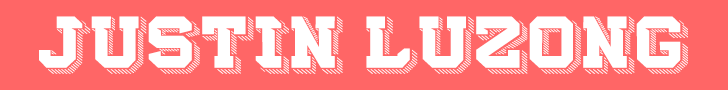
<style>
.page{position:relative;width:728px;height:90px;background:#ff6666}
.page>*{position:absolute;margin:0}
.t1{font:60px "SPComplex";color:#ffffff;scale:1.04 1}
</style>
<div class="page">
<p class="t1" style="left:39px;top:16px;width:649px;height:58px">JUSTIN LUZONG</p>
</div>
